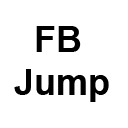
<style>
.page{position:relative;width:128px;height:128px;background:#ffffff}
.page>*{position:absolute;margin:0}
.t1{font:36px "Arial-BoldMT";color:#000000}
</style>
<div class="page">
<p class="t1" style="left:14px;top:26px;width:95px;height:76px">FB<br>Jump</p>
</div>
